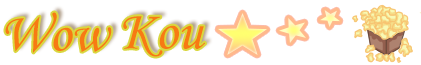
<style>
.page{position:relative;width:421px;height:65px;background:#ffffff}
.page>*{position:absolute;margin:0}
.t1{font:55px "MonotypeCorsiva";color:#f77a13}
</style>
<div class="page">
<p class="t1" style="left:5px;top:12px;width:107px;height:41px">Wow</p>
<p class="t1" style="left:123px;top:16px;width:82px;height:41px">Kou</p>
</div>
